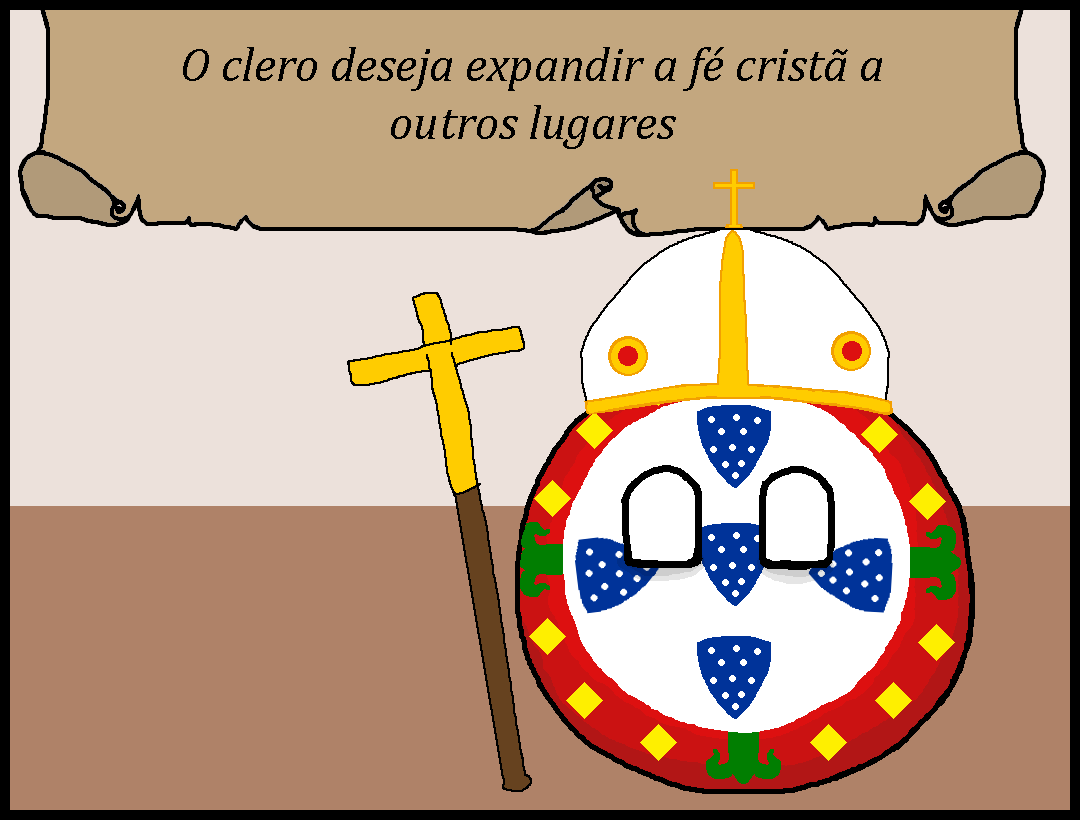
<style>
.page{position:relative;width:1080px;height:820px;background:#ece1db}
.page>*{position:absolute;margin:0}
.t1{font:48px "Cambria-Italic";color:#000000}
</style>
<div class="page">
<p class="t1" style="left:183px;top:47px;width:699px;height:102px;text-align:center">O clero deseja expandir a fé cristã a outros lugares</p>
</div>
